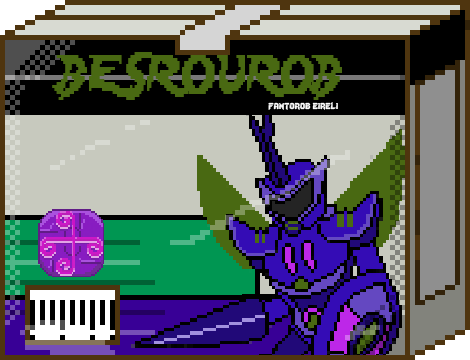
<style>
.page{position:relative;width:470px;height:360px}
.page>*{position:absolute;margin:0}
.t1{font:48px "Lady-Radical";color:#496912;scale:0.72 1}
.t2{font:12px "Lady-Radical";color:#fbfbfb}
</style>
<div class="page">
<p class="t1" style="left:52px;top:52px;width:290px;height:48px">BESROUROB</p>
<p class="t2" style="left:268px;top:102px;width:70px;height:8px">fantorob eireli</p>
</div>
